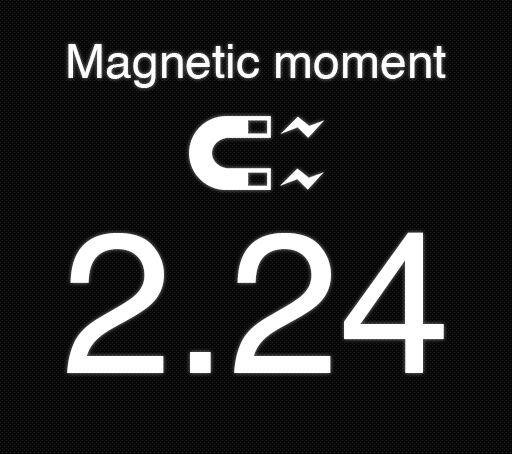
<style>
.page{position:relative;width:512px;height:454px;background:#080808}
.page>*{position:absolute;margin:0}
.t1{font:48px "Helvetica";color:#ffffff}
.t2{font:200px "Helvetica";color:#ffffff}
</style>
<div class="page">
<p class="t1" style="left:68px;top:44px;width:378px;height:44px">Magnetic moment</p>
<p class="t2" style="left:67px;top:232px;width:377px;height:141px">2.24</p>
</div>
